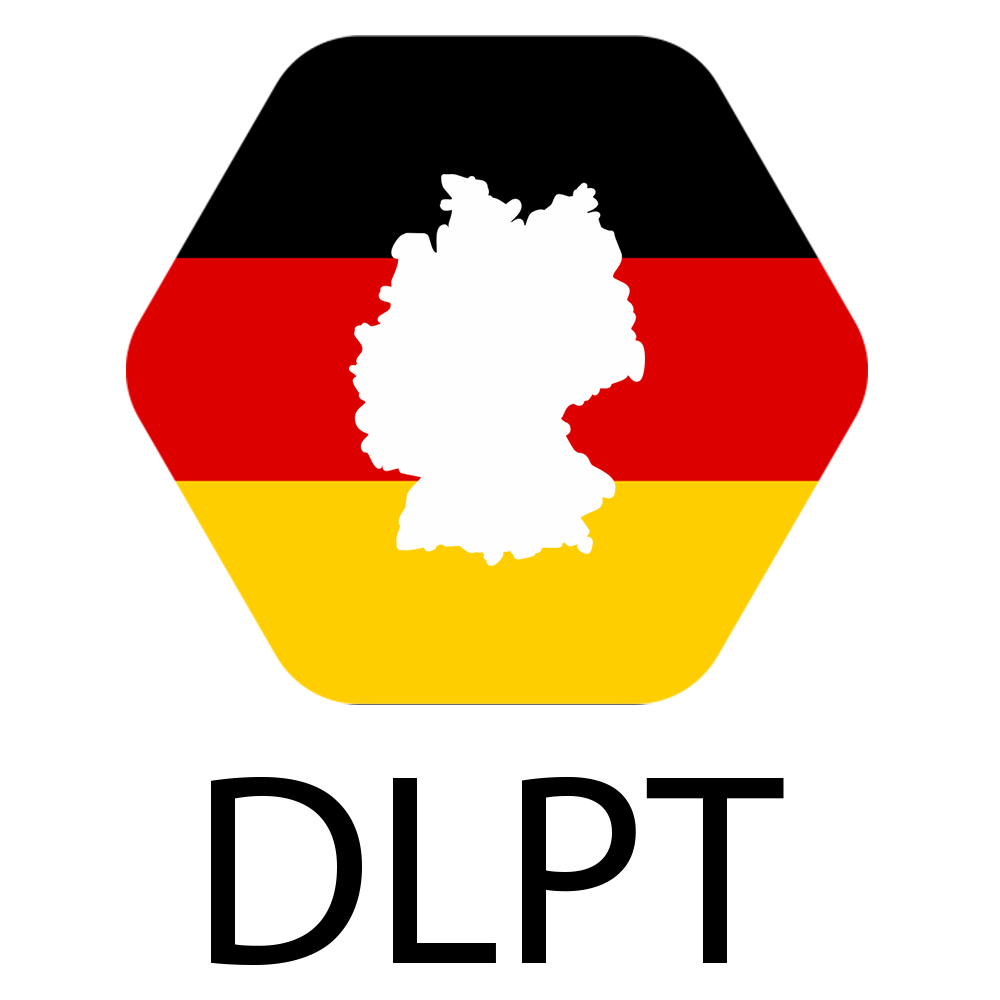
<style>
.page{position:relative;width:1000px;height:1000px;background:#ffffff}
.page>*{position:absolute;margin:0}
.t1{font:383.8px "MyriadArabic-Regular";color:#000000}
</style>
<div class="page">
<p class="t1" style="left:211px;top:776px;width:573px;height:189px">DLPT</p>
</div>
